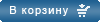
<style>
.page{position:relative;width:100px;height:22px}
.page>*{position:absolute;margin:0}
.t1{font:11px "ArialMT";letter-spacing:0.099em;color:#ffffff}
</style>
<div class="page">
<p class="t1" style="left:10px;top:6px;width:58px;height:10px">В корзину</p>
</div>
